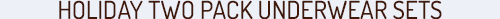
<style>
.page{position:relative;width:500px;height:19px;background:#eef0f7}
.page>*{position:absolute;margin:0}
.t1{font:25px "Dosis-Medium";color:#40190b}
</style>
<div class="page">
<p class="t1" style="left:59px;top:0px;width:383px;height:20px">HOLIDAY TWO PACK UNDERWEAR SETS</p>
</div>
